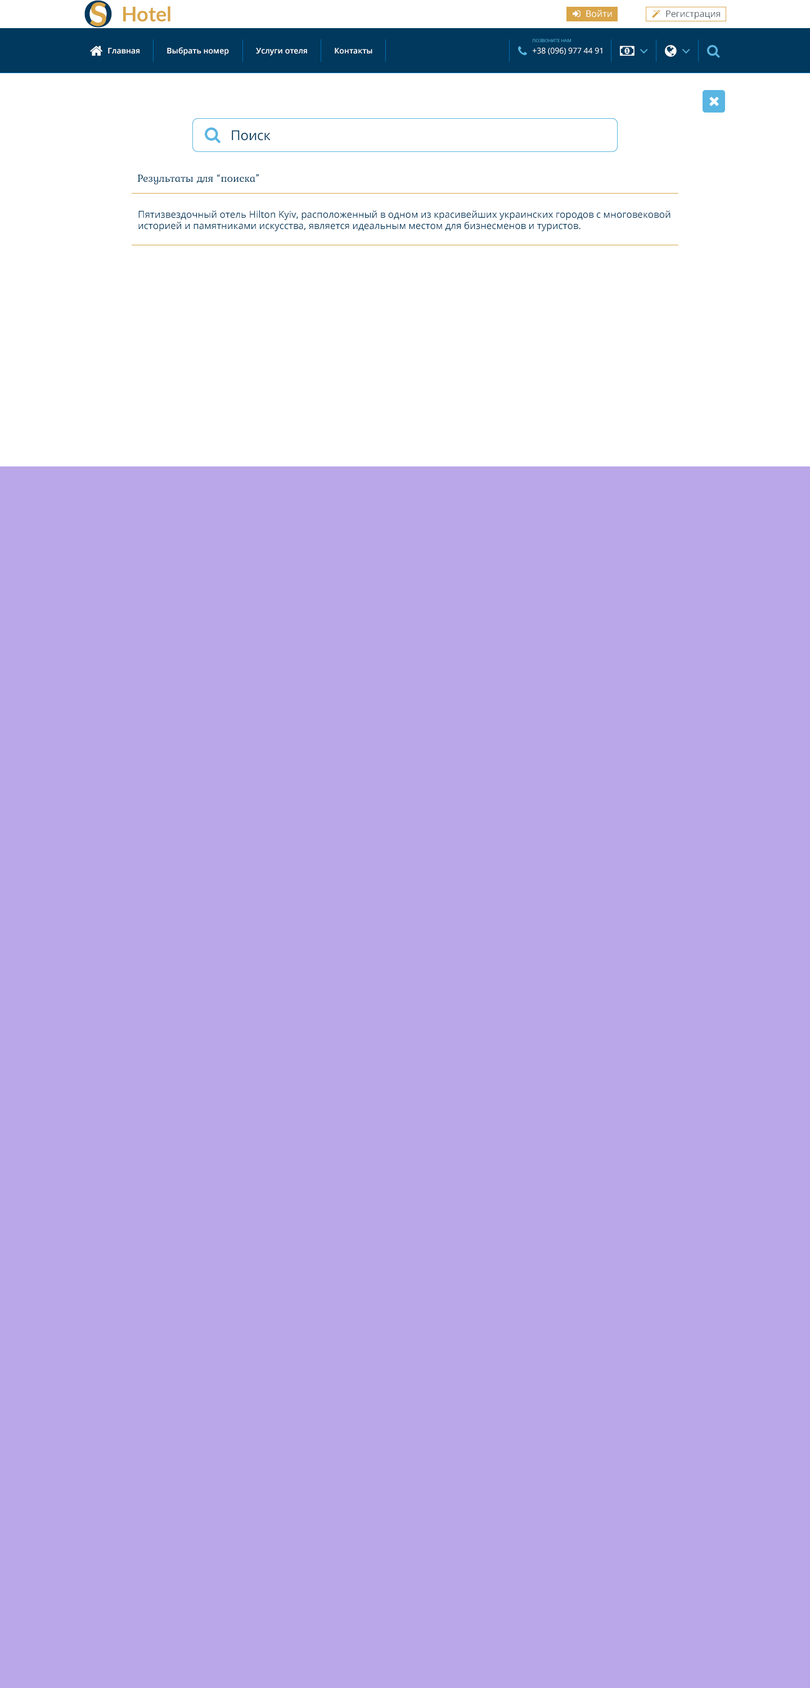
<style>
.page{position:relative;width:810px;height:1688px;background:#baa7e9}
.page>*{position:absolute;margin:0}
.t1{font:36.4px "Lato-Bold";color:#00395d}
.t2{font:32.3px "Lato-Bold";color:#d9a548}
.t3{font:20.2px "Lato-Bold";color:#d9a548}
.t4{font:9px "OpenSans";color:#ffffff}
.t5{font:9px "OpenSans";color:#565f65}
.t6{font:4.5px "OpenSans";color:#59b5e2;text-transform:uppercase}
.t7{font:7.9px "OpenSans-Semibold";color:#ffffff}
.t8{font:7.9px "OpenSans";color:#ffffff}
.t9{font:13.5px "OpenSans";color:#00395d}
.t10{font:10.7px "Kurale-Regular";color:#00395d}
.t11{font:9.6px "OpenSans";color:#00395d}
</style>
<div class="page">
<p class="t1" style="left:84px;top:0px;width:28px;height:28px">O</p>
<p class="t2" style="left:90px;top:2px;width:16px;height:24px">S</p>
<p class="t3" style="left:123px;top:6px;width:47px;height:16px">Hotel</p>
<p class="t4" style="left:586px;top:10px;width:26px;height:7px">Войти</p>
<p class="t5" style="left:666px;top:10px;width:54px;height:9px">Регистрация</p>
<p class="t6" style="left:533px;top:39px;width:38px;height:3px">Позвоните нам</p>
<p class="t7" style="left:108px;top:48px;width:32px;height:6px">Главная</p>
<p class="t7" style="left:167px;top:47px;width:62px;height:9px">Выбрать номер</p>
<p class="t7" style="left:256px;top:48px;width:51px;height:8px">Услуги отеля</p>
<p class="t7" style="left:335px;top:48px;width:37px;height:6px">Контакты</p>
<p class="t8" style="left:533px;top:47px;width:69px;height:8px">+38 (096) 977 44 91</p>
<p class="t9" style="left:232px;top:130px;width:39px;height:11px">Поиск</p>
<p class="t9" style="left:232px;top:130px;width:39px;height:11px">Поиск</p>
<p class="t10" style="left:137px;top:174px;width:122px;height:10px">Результаты для “поиска”</p>
<p class="t11" style="left:138px;top:210px;width:532px;height:21px">Пятизвездочный отель Hilton Kyiv, расположенный в одном из красивейших украинских городов с многовековой историей и памятниками искусства, является идеальным местом для бизнесменов и туристов.</p>
</div>
